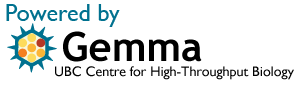
<style>
.page{position:relative;width:300px;height:85px;background:#ffffff}
.page>*{position:absolute;margin:0}
.t1{font:24px "GillSansMT";color:#00718f}
.t2{font:14px "GillSansMT";color:#010101}
</style>
<div class="page">
<p class="t1" style="left:6px;top:4px;width:114px;height:23px">Powered by</p>
<p class="t2" style="left:55px;top:66px;width:239px;height:14px">UBC Centre for High-Throughput Biology</p>
</div>
